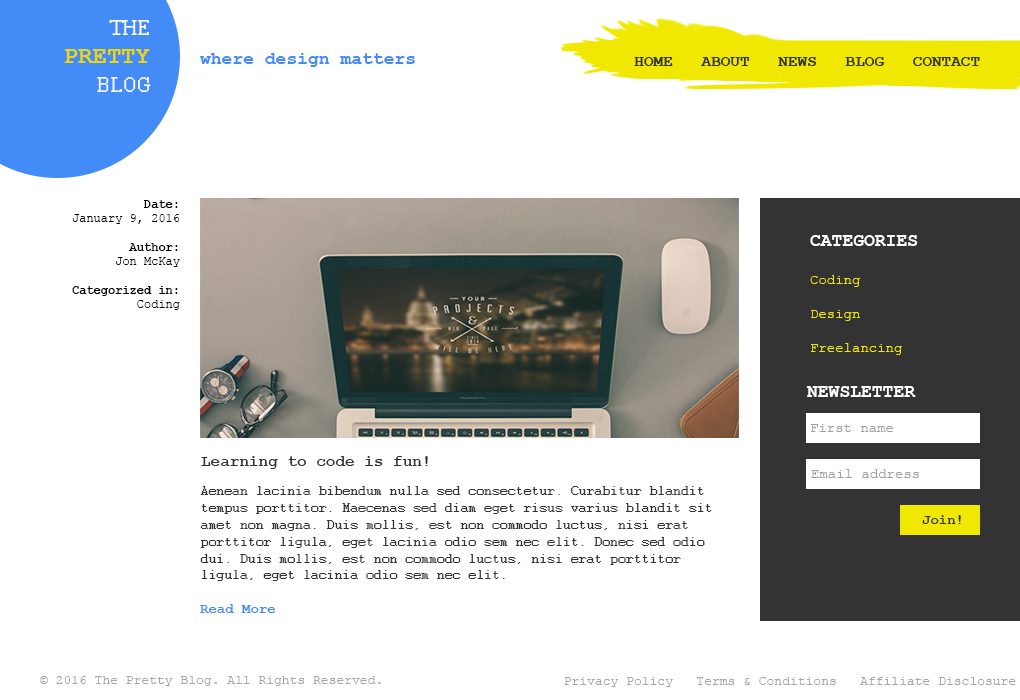
<style>
.page{position:relative;width:1020px;height:700px;background:#ffffff}
.page>*{position:absolute;margin:0}
.t1{font:24px "CourierNewPS-BoldMT";color:#f0d700}
.t2{font:24px "Courier";color:#fffefe}
.t3{font:18px "CourierNewPS-BoldMT";color:#438bf7}
.t4{font:12px "CourierNewPSMT";color:#010101}
.t5{font:12px "CourierNewPS-BoldMT";color:#010101}
.t6{font:14px "CourierNewPSMT";color:#f0e801}
.t7{font:18px "CourierNewPS-BoldMT";color:#ffffff}
.t8{font:14px "CourierNewPSMT";color:#9f9f9f}
.t9{font:16px "CourierNewPS-BoldMT";color:#333333}
.t10{font:14px "Courier";color:#333333}
.t11{font:14px "CourierNewPS-BoldMT";color:#438bf7}
.t12{font:14px "CourierNewPS-BoldMT";color:#333333}
.t13{font:13px "CourierNewPSMT";color:#a6a6a6}
</style>
<div class="page">
<p class="t1" style="left:64px;top:20px;width:87px;height:72px;text-align:right"><span class="t2">THE<br> </span>PRETTY<br><span class="t2"> BLOG</span></p>
<p class="t3" style="left:200px;top:53px;width:215px;height:14px">where design matters</p>
<p class="t4" style="left:72px;top:200px;width:108px;height:110px;text-align:right"><span class="t5">Date:<br></span>January 9, 2016<br><br><span class="t5">Author:<br></span>Jon McKay<br><br><span class="t5">Categorized in:<br></span>Coding</p>
<p class="t6" style="left:810px;top:235px;width:108px;height:120px"><span class="t7">CATEGORIES<br><br></span>Coding<br><br>Design<br><br>Freelancing</p>
<p class="t7" style="left:806px;top:386px;width:110px;height:11px">NEWSLETTER</p>
<p class="t8" style="left:811px;top:424px;width:82px;height:8px">First name</p>
<p class="t9" style="left:201px;top:456px;width:227px;height:13px">Learning to code is fun!</p>
<p class="t8" style="left:811px;top:469px;width:108px;height:9px">Email address</p>
<p class="t10" style="left:200px;top:486px;width:512px;height:127px">Aenean lacinia bibendum nulla sed consectetur. Curabitur blandit tempus porttitor. Maecenas sed diam eget risus varius blandit sit amet non magna. Duis mollis, est non commodo luctus, nisi erat porttitor ligula, eget lacinia odio sem nec elit. Donec sed odio dui. Duis mollis, est non commodo luctus, nisi erat porttitor ligula, eget lacinia odio sem nec elit.<br><br><span class="t11">Read More</span></p>
<p class="t12" style="left:922px;top:515px;width:39px;height:9px">Join!</p>
<p class="t13" style="left:39px;top:676px;width:342px;height:10px">© 2016 The Pretty Blog. All Rights Reserved.</p>
<p class="t13" style="left:564px;top:677px;width:452px;height:10px">Privacy Policy   Terms &amp; Conditions   Affiliate Disclosure</p>
</div>
